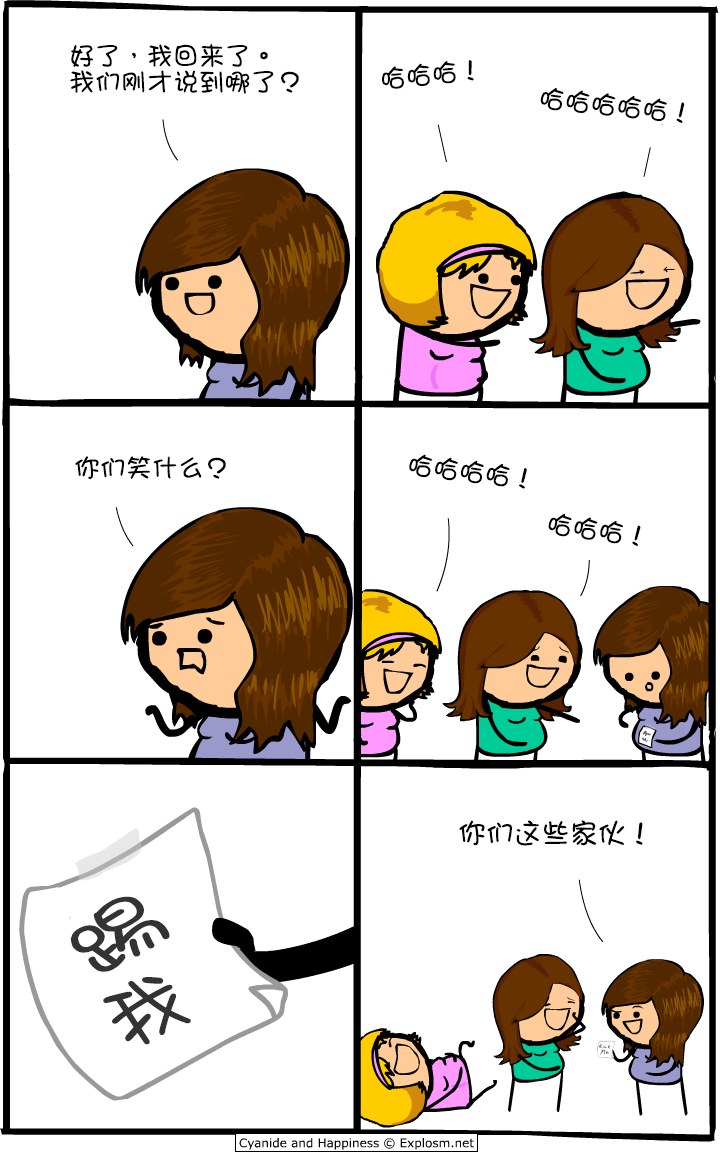
<style>
.page{position:relative;width:720px;height:1160px;background:#ffffff}
.page>*{position:absolute;margin:0}
.t1{font:26px/26px "DFGirl";color:#000000}
.t2{font:26px "DFGirl";color:#000000}
.t3{font:28px "DFGirl";color:#000000}
.t4{font:77px "DFGirl";color:#333333;scale:1.26 1}
.t5{font:74.6px "DFGirl";color:#333333;scale:1.06 1}
</style>
<div class="page">
<p class="t1" style="left:70px;top:43px;width:229px;height:51px">好了，我回来了。<br>我们刚才说到哪了？</p>
<p class="t2" style="left:382px;top:60px;width:92px;height:29px;rotate:-6deg">哈哈哈！</p>
<p class="t2" style="left:540px;top:88px;width:145px;height:35px;rotate:6deg">哈哈哈哈哈！</p>
<p class="t2" style="left:75px;top:456px;width:151px;height:24px">你们笑什么？</p>
<p class="t2" style="left:409px;top:454px;width:118px;height:35px;rotate:7deg">哈哈哈哈！</p>
<p class="t2" style="left:548px;top:513px;width:93px;height:33px;rotate:8deg">哈哈哈！</p>
<p class="t3" style="left:459px;top:820px;width:184px;height:26px">你们这些家伙！</p>
<p class="t4" style="left:70px;top:896px;width:100px;height:76px;rotate:-33deg">踢</p>
<p class="t5" style="left:103px;top:977px;width:88px;height:68px;rotate:-26deg">我</p>
</div>
